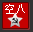
<style>
.page{position:relative;width:33px;height:32px;background:#c50000}
.page>*{position:absolute;margin:0}
.t1{font:10.8px "SimSun";color:#ffffff}
</style>
<div class="page">
<p class="t1" style="left:5px;top:4px;width:20px;height:10px">空八</p>
</div>
